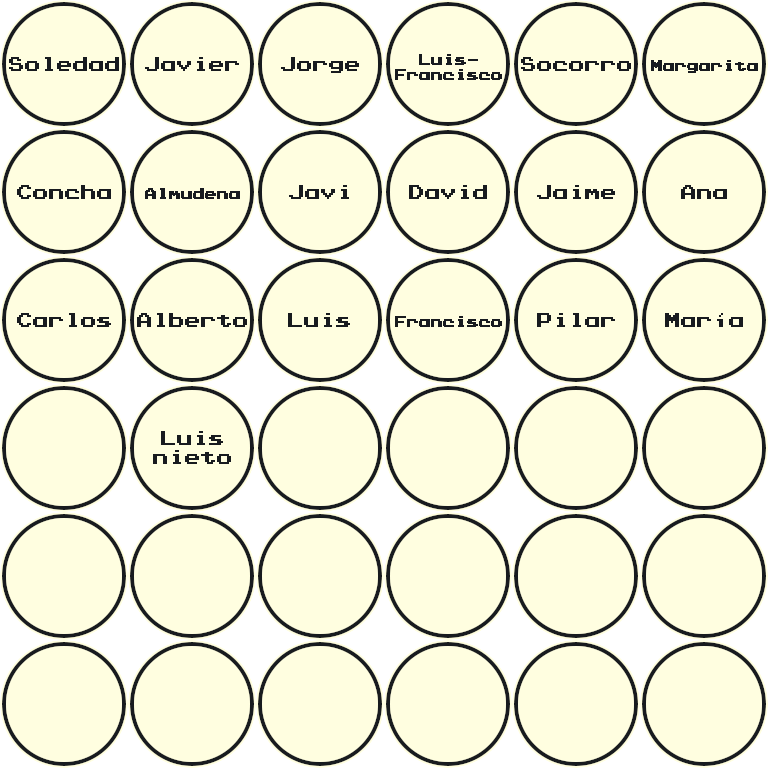
<style>
.page{position:relative;width:768px;height:768px;background:#fffee0}
.page>*{position:absolute;margin:0}
.t1{font:12px "PressStartK";color:#181b1f}
.t2{font:16px "PressStartK";color:#181b1f}
</style>
<div class="page">
<p class="t1" style="left:395px;top:54px;width:107px;height:26px;text-align:center">Luis-<br>Francisco</p>
<p class="t2" style="left:9px;top:57px;width:110px;height:14px">Soledad</p>
<p class="t2" style="left:145px;top:57px;width:94px;height:14px">Javier</p>
<p class="t2" style="left:281px;top:57px;width:78px;height:16px">Jorge</p>
<p class="t2" style="left:521px;top:57px;width:110px;height:14px">Socorro</p>
<p class="t1" style="left:651px;top:60px;width:107px;height:13px">Margarita</p>
<p class="t2" style="left:17px;top:185px;width:94px;height:14px">Concha</p>
<p class="t2" style="left:289px;top:185px;width:60px;height:14px">Javi</p>
<p class="t2" style="left:409px;top:185px;width:78px;height:14px">David</p>
<p class="t2" style="left:537px;top:185px;width:78px;height:14px">Jaime</p>
<p class="t2" style="left:681px;top:185px;width:46px;height:14px">Ana</p>
<p class="t1" style="left:145px;top:188px;width:95px;height:11px">Almudena</p>
<p class="t2" style="left:17px;top:313px;width:94px;height:14px">Carlos</p>
<p class="t2" style="left:137px;top:313px;width:110px;height:14px">Alberto</p>
<p class="t2" style="left:288px;top:313px;width:62px;height:14px">Luis</p>
<p class="t1" style="left:395px;top:316px;width:107px;height:11px">Francisco</p>
<p class="t2" style="left:537px;top:313px;width:78px;height:14px">Pilar</p>
<p class="t2" style="left:665px;top:313px;width:78px;height:14px">María</p>
<p class="t2" style="left:153px;top:431px;width:78px;height:33px;text-align:center">Luis<br>nieto</p>
</div>
